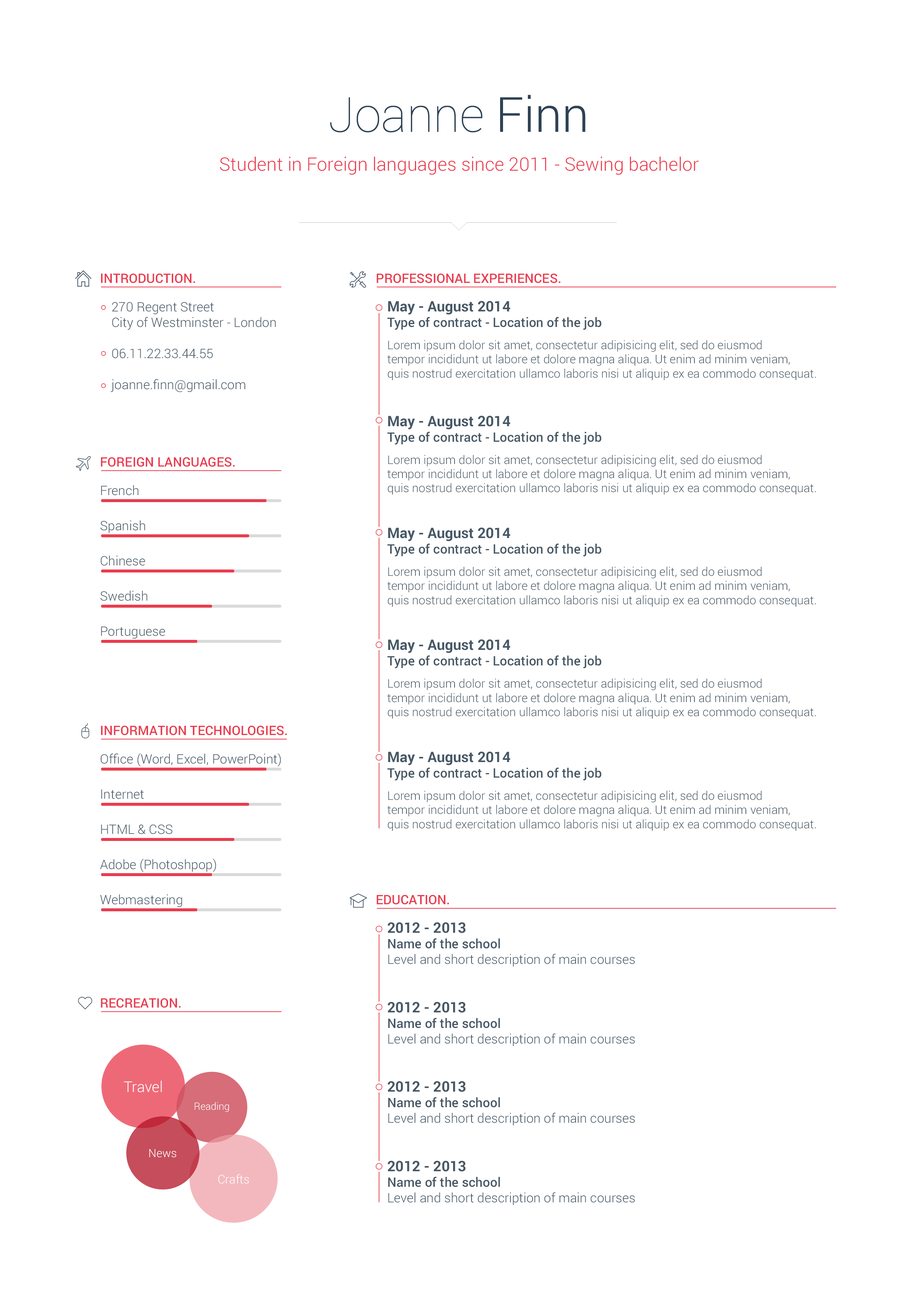
<style>
.page{position:relative;width:918px;height:1299px;background:#ffffff}
.page>*{position:absolute;margin:0}
.t1{font:48.5px "Roboto-Thin";color:#2d4255}
.t2{font:48.5px "Roboto-Light";color:#2d4255}
.t3{font:18.5px "Roboto-Light";color:#e93c4f}
.t4{font:13px "Roboto-Medium";color:#e93c4f;text-transform:uppercase}
.t5{font:13px "Roboto-Light";color:#465866}
.t6{font:11.8px "Roboto-Light";color:#465866}
.t7{font:14.4px "Roboto-Bold";color:#465866}
.t8{font:13px "Roboto-Medium";color:#465866}
.t9{font:11.8px/22.2px "Roboto-Light";color:#465866}
.t10{font:13px/35.2px "Roboto-Light";color:#465866}
.t11{font:14.8px "Roboto-Light";color:#ffffff}
.t12{font:10px "Roboto-Light";color:#ffffff}
.t13{font:11.5px "Roboto-Light";color:#ffffff}
.t14{font:11.9px "Roboto-Light";color:#ffffff}
</style>
<div class="page">
<p class="t1" style="left:330px;top:95px;width:256px;height:38px">Joanne <span class="t2">Finn</span></p>
<p class="t3" style="left:220px;top:157px;width:479px;height:18px">Student in Foreign languages since 2011 - Sewing bachelor</p>
<p class="t4" style="left:101px;top:273px;width:94px;height:10px">Introduction.</p>
<p class="t4" style="left:377px;top:273px;width:184px;height:10px">Professional experiences.</p>
<p class="t5" style="left:111px;top:302px;width:165px;height:90px">270 Regent Street<br>City of Westminster - London<br><br>06.11.22.33.44.55<br><br>joanne.finn@gmail.com</p>
<p class="t6" style="left:387px;top:301px;width:429px;height:530px"><span class="t7">May - August 2014<br></span><span class="t8">Type of contract - Location of the job<br></span><span class="t9">Lorem ipsum dolor sit amet, consectetur adipisicing elit, sed do eiusmod <br></span>tempor incididunt ut labore et dolore magna aliqua. Ut enim ad minim veniam, <br>quis nostrud exercitation ullamco laboris nisi ut aliquip ex ea commodo consequat.<br><br><br><span class="t7">May - August 2014<br></span><span class="t8">Type of contract - Location of the job<br></span><span class="t9">Lorem ipsum dolor sit amet, consectetur adipisicing elit, sed do eiusmod <br></span>tempor incididunt ut labore et dolore magna aliqua. Ut enim ad minim veniam, <br>quis nostrud exercitation ullamco laboris nisi ut aliquip ex ea commodo consequat.<br><br><br><span class="t7">May - August 2014<br></span><span class="t8">Type of contract - Location of the job<br></span><span class="t9">Lorem ipsum dolor sit amet, consectetur adipisicing elit, sed do eiusmod <br></span>tempor incididunt ut labore et dolore magna aliqua. Ut enim ad minim veniam, <br>quis nostrud exercitation ullamco laboris nisi ut aliquip ex ea commodo consequat.<br><br><br><span class="t7">May - August 2014<br></span><span class="t8">Type of contract - Location of the job<br></span><span class="t9">Lorem ipsum dolor sit amet, consectetur adipisicing elit, sed do eiusmod <br></span>tempor incididunt ut labore et dolore magna aliqua. Ut enim ad minim veniam, <br>quis nostrud exercitation ullamco laboris nisi ut aliquip ex ea commodo consequat.<br><br><br><span class="t7">May - August 2014<br></span><span class="t8">Type of contract - Location of the job<br></span><span class="t9">Lorem ipsum dolor sit amet, consectetur adipisicing elit, sed do eiusmod <br></span>tempor incididunt ut labore et dolore magna aliqua. Ut enim ad minim veniam, <br>quis nostrud exercitation ullamco laboris nisi ut aliquip ex ea commodo consequat.</p>
<p class="t4" style="left:101px;top:457px;width:134px;height:10px">Foreign Languages.</p>
<p class="t10" style="left:100px;top:485px;width:65px;height:154px">French<br>Spanish<br>Chinese<br>Swedish<br>Portuguese</p>
<p class="t4" style="left:101px;top:725px;width:186px;height:10px">Information technologies.</p>
<p class="t10" style="left:100px;top:753px;width:181px;height:154px">Office (Word, Excel, PowerPoint)<br>Internet<br>HTML &amp; CSS<br>Adobe (Photoshpop)<br>Webmastering</p>
<p class="t4" style="left:377px;top:894px;width:72px;height:10px">Education.</p>
<p class="t5" style="left:388px;top:922px;width:247px;height:283px"><span class="t7">2012 - 2013<br></span><span class="t8">Name of the school<br></span>Level and short description of main courses<br><br><br><span class="t7">2012 - 2013<br></span><span class="t8">Name of the school<br></span>Level and short description of main courses<br><br><br><span class="t7">2012 - 2013<br></span><span class="t8">Name of the school<br></span>Level and short description of main courses<br><br><br><span class="t7">2012 - 2013<br></span><span class="t8">Name of the school<br></span>Level and short description of main courses</p>
<p class="t4" style="left:101px;top:998px;width:80px;height:10px">Recreation.</p>
<p class="t11" style="left:124px;top:1080px;width:38px;height:12px">Travel</p>
<p class="t12" style="left:195px;top:1102px;width:34px;height:10px">Reading</p>
<p class="t13" style="left:149px;top:1149px;width:27px;height:8px">News</p>
<p class="t14" style="left:218px;top:1174px;width:31px;height:10px">Crafts</p>
</div>
